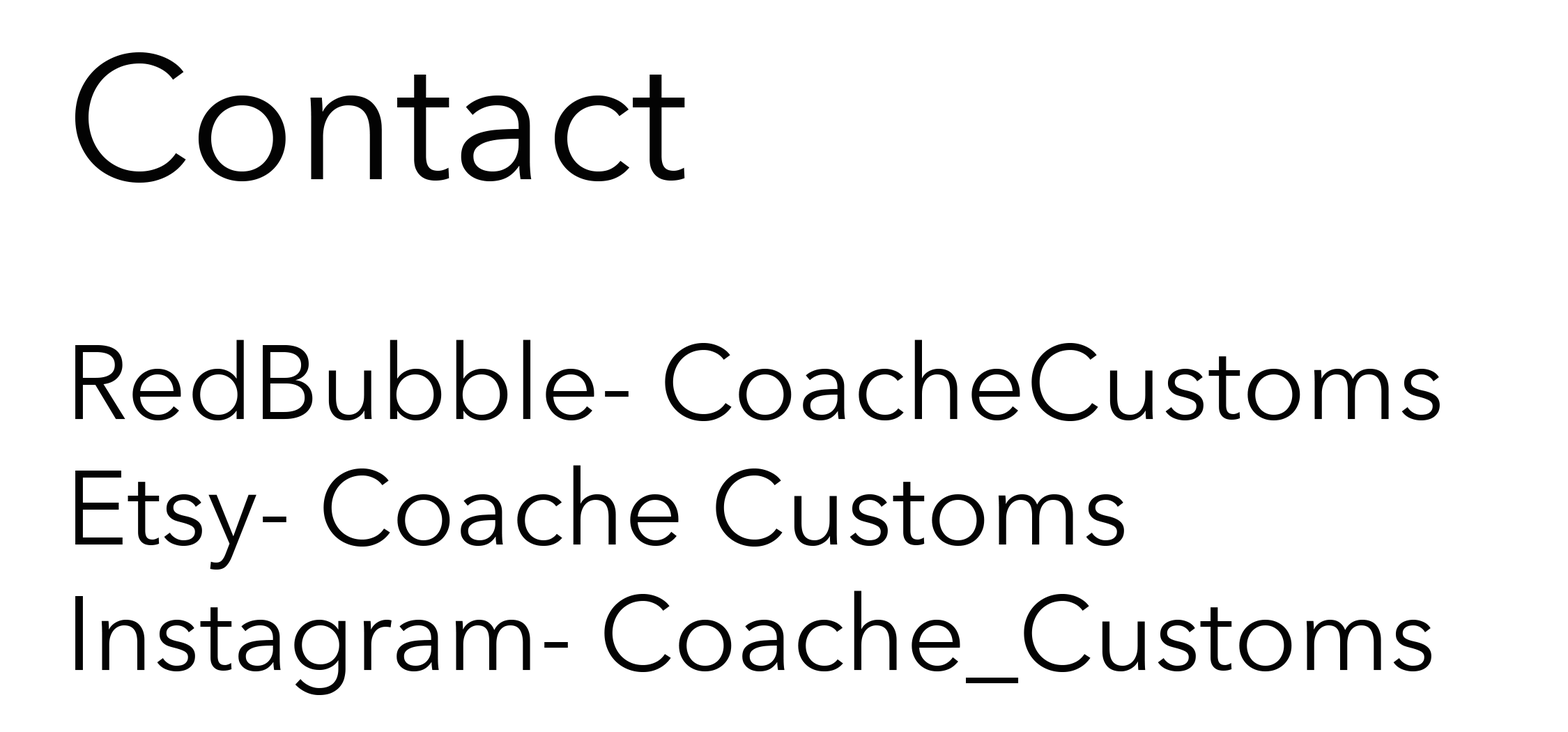
<style>
.page{position:relative;width:1568px;height:732px;background:#ffffff}
.page>*{position:absolute;margin:0}
.t1{font:174.2px "AvenirNext-Regular";color:#030303}
.t2{font:104.5px "AvenirNext-Regular";color:#030303}
</style>
<div class="page">
<p class="t1" style="left:75px;top:52px;width:610px;height:131px">Contact</p>
<p class="t2" style="left:75px;top:339px;width:1365px;height:356px">RedBubble- CoacheCustoms<br>Etsy- Coache Customs<br>Instagram- Coache_Customs</p>
</div>
